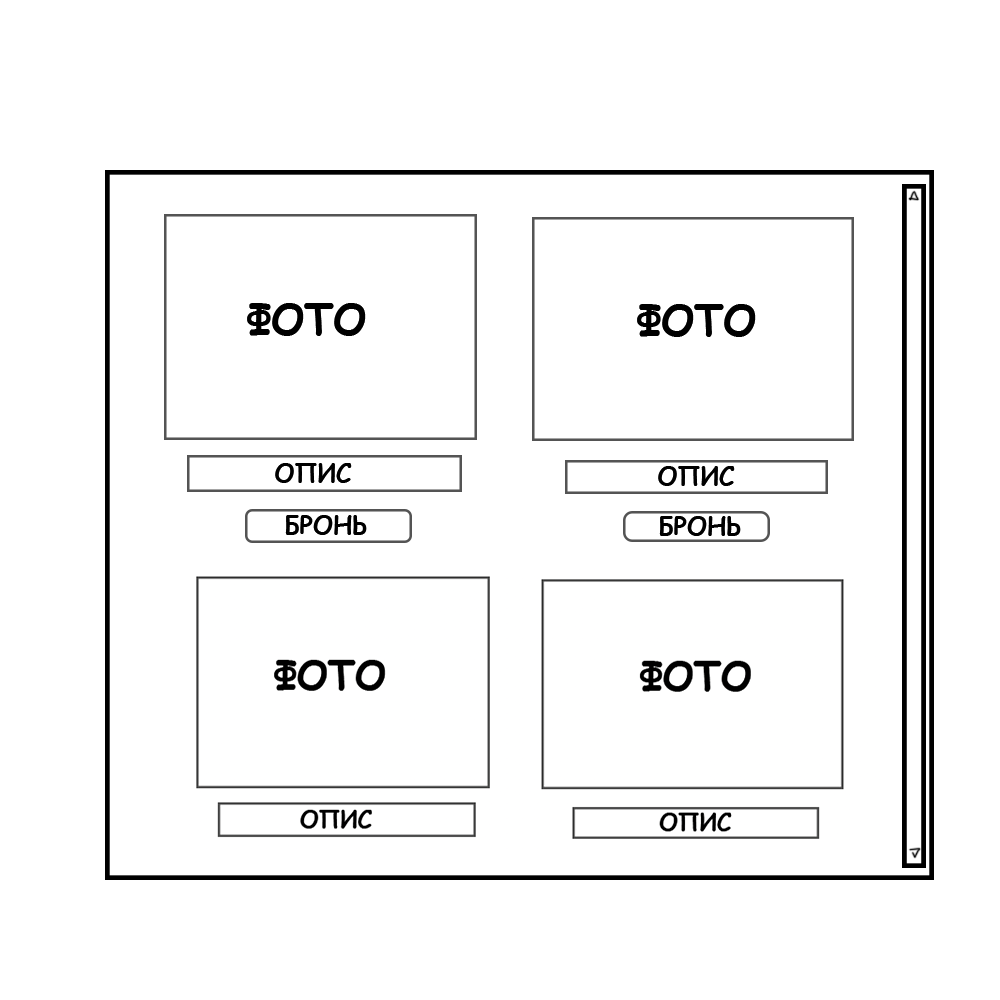
<style>
.page{position:relative;width:1000px;height:1000px;background:#ffffff}
.page>*{position:absolute;margin:0}
.t1{font:41.7px "ComicSansMS-Bold";color:#000000;text-transform:uppercase}
.t2{font:25px "ComicSansMS-Bold";color:#000000;text-transform:uppercase}
</style>
<div class="page">
<p class="t1" style="left:247px;top:303px;width:119px;height:33px">Фото</p>
<p class="t1" style="left:247px;top:303px;width:119px;height:33px">Фото</p>
<p class="t1" style="left:637px;top:304px;width:119px;height:33px">Фото</p>
<p class="t1" style="left:637px;top:304px;width:119px;height:33px">Фото</p>
<p class="t2" style="left:275px;top:463px;width:77px;height:20px">опис</p>
<p class="t2" style="left:275px;top:463px;width:77px;height:20px">опис</p>
<p class="t2" style="left:658px;top:466px;width:77px;height:20px">опис</p>
<p class="t2" style="left:658px;top:466px;width:77px;height:20px">опис</p>
<p class="t2" style="left:285px;top:515px;width:82px;height:20px">бронь</p>
<p class="t2" style="left:285px;top:515px;width:82px;height:20px">бронь</p>
<p class="t2" style="left:659px;top:516px;width:82px;height:20px">бронь</p>
<p class="t2" style="left:659px;top:516px;width:82px;height:20px">бронь</p>
</div>
